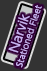
<style>
.page{position:relative;width:47px;height:71px;background:#333333}
.page>*{position:absolute;margin:0}
.t1{font:8px/12px "UDShinGoPro-Light";color:#c9b3f2;font-weight:bold}
.t2{font:12px/12px "UDShinGoPro-Light";color:#c9b3f2;font-weight:bold}
</style>
<div class="page">
<p class="t1" style="left:8px;top:5px;width:34px;height:63px;text-align:center;rotate:-72deg"><span class="t2">Narvik<br></span>Stationed Fleet</p>
</div>
